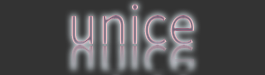
<style>
.page{position:relative;width:265px;height:75px;background:#333333}
.page>*{position:absolute;margin:0}
.t1{font:51.4px "SourceHanSansCN-Normal"}
</style>
<div class="page">
<p class="t1" style="left:71px;top:4px;width:123px;height:41px">unice</p>
</div>
